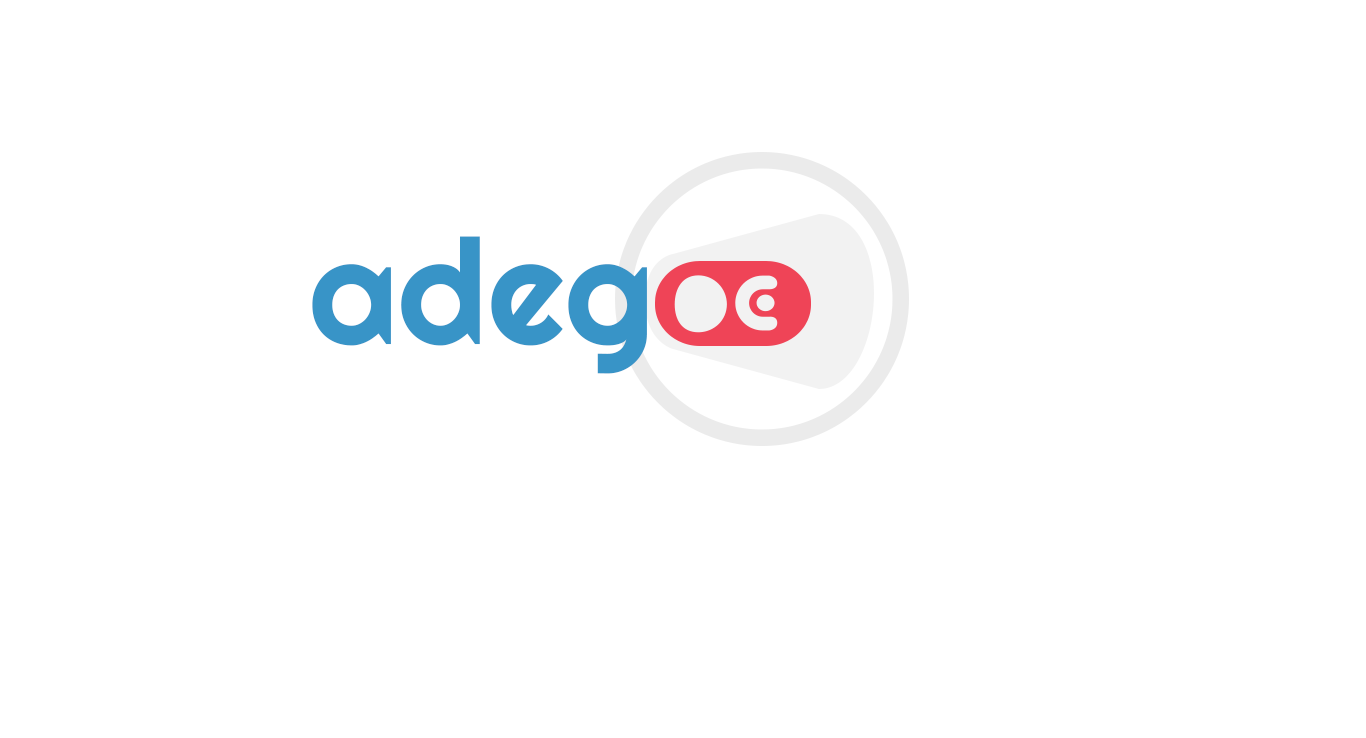
<style>
.page{position:relative;width:1366px;height:738px;background:#ffffff}
.page>*{position:absolute;margin:0}
.t1{font:147.3px "Righteous-Regular";color:#3894c7}
</style>
<div class="page">
<p class="t1" style="left:312px;top:236px;width:335px;height:138px">adeg</p>
</div>
